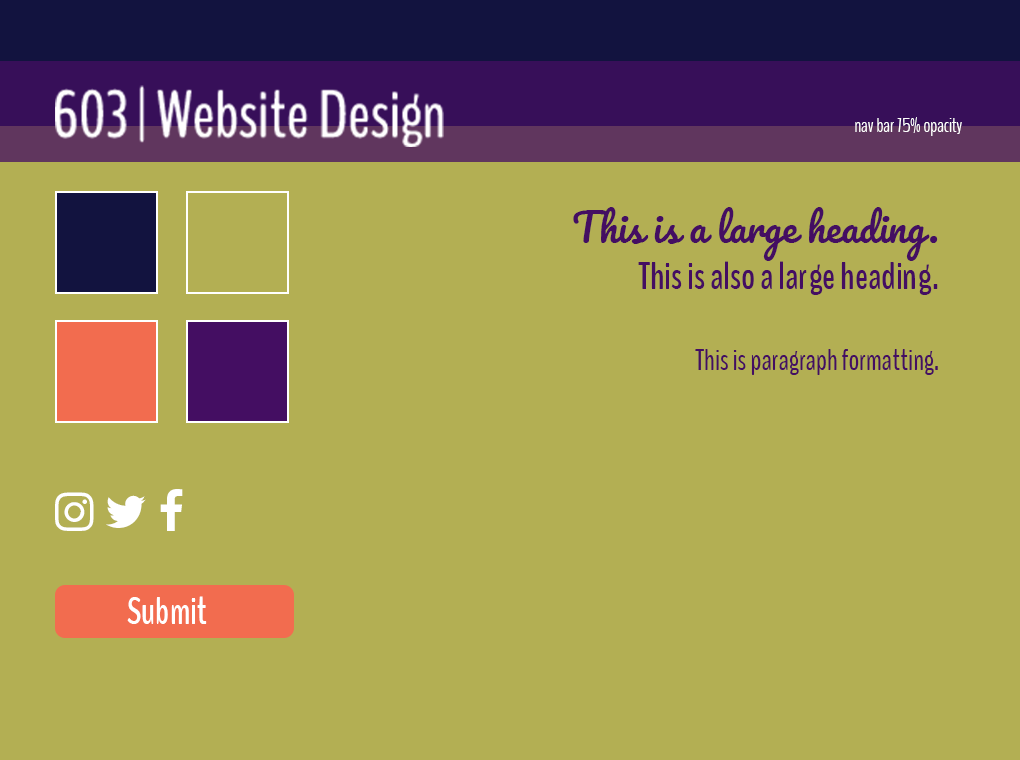
<style>
.page{position:relative;width:1020px;height:760px;background:#b3af53}
.page>*{position:absolute;margin:0}
.t1{font:20px "BenchNine-Light";color:#ffffff}
.t2{font:38px "BenchNine-Bold";color:#440e62}
.t3{font:38px "Pacifico-Regular";color:#440e62}
.t4{font:30px "BenchNine-Regular";color:#440e62}
.t5{font:38px "BenchNine-Bold";color:#ffffff}
</style>
<div class="page">
<p class="t1" style="left:855px;top:117px;width:107px;height:19px">nav bar 75% opacity</p>
<p class="t2" style="left:573px;top:207px;width:365px;height:168px;text-align:right"><span class="t3">This is a large heading.<br></span>This is also a large heading.<br><br><span class="t4">This is paragraph formatting.</span></p>
<p class="t5" style="left:127px;top:596px;width:80px;height:28px">Submit</p>
</div>
